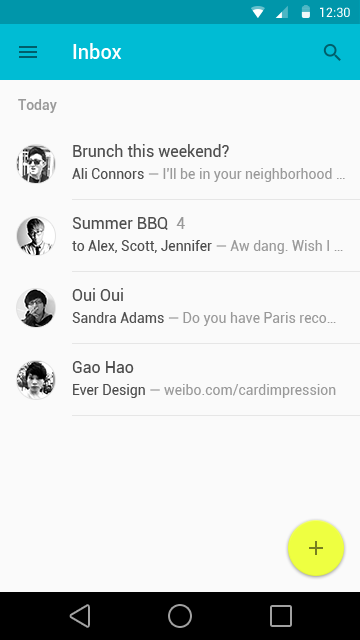
<style>
.page{position:relative;width:360px;height:640px;background:#fafafa}
.page>*{position:absolute;margin:0}
.t1{font:12.7px "Roboto-Regular";color:#ffffff}
.t2{font:20px "Roboto-Medium";color:#ffffff}
.t3{font:14px "Roboto-Medium";color:#999999}
.t4{font:16px "Roboto-Regular";color:#4d4d4d}
.t5{font:14px "Roboto-Regular";color:#999999}
.t6{font:14px "Roboto-Regular";color:#4d4d4d}
.t7{font:16px "Roboto-Regular";color:#999999}
</style>
<div class="page">
<p class="t1" style="left:320px;top:7px;width:30px;height:10px">12:30</p>
<p class="t2" style="left:73px;top:43px;width:49px;height:16px">Inbox</p>
<p class="t3" style="left:18px;top:99px;width:39px;height:14px">Today</p>
<p class="t4" style="left:73px;top:144px;width:156px;height:13px">Brunch this weekend?</p>
<p class="t5" style="left:72px;top:168px;width:273px;height:14px"><span class="t6">Ali Connors</span> — I'll be in your neighborhood …</p>
<p class="t4" style="left:72px;top:217px;width:113px;height:13px">Summer BBQ  <span class="t7">4</span></p>
<p class="t6" style="left:72px;top:240px;width:271px;height:14px">to Alex, Scott, Jennifer<span class="t5"> — Aw dang. Wish I …</span></p>
<p class="t4" style="left:72px;top:288px;width:51px;height:13px">Oui Oui</p>
<p class="t5" style="left:72px;top:312px;width:264px;height:14px"><span class="t6">Sandra Adams</span> — Do you have Paris reco…</p>
<p class="t4" style="left:72px;top:361px;width:62px;height:12px">Gao Hao</p>
<p class="t5" style="left:73px;top:384px;width:263px;height:14px"><span class="t6">Ever Design</span> — weibo.com/cardimpression</p>
</div>
